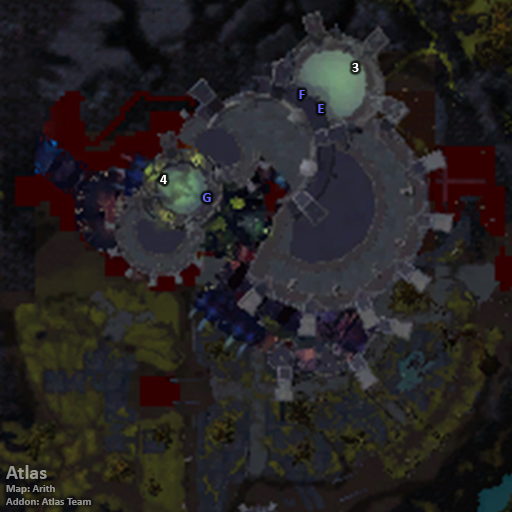
<style>
.page{position:relative;width:512px;height:512px}
.page>*{position:absolute;margin:0}
.t1{font:14px "Calibri-Bold";color:#ffffff}
.t2{font:14px "Calibri-Bold";color:#6666ff}
.t3{font:11px "Calibri-Bold";color:#959492}
.t4{font:20px "Calibri-Bold";color:#959492}
</style>
<div class="page">
<p class="t1" style="left:352px;top:63px;width:7px;height:9px">3</p>
<p class="t2" style="left:299px;top:90px;width:6px;height:9px">F</p>
<p class="t2" style="left:318px;top:104px;width:6px;height:9px">E</p>
<p class="t1" style="left:160px;top:175px;width:7px;height:9px">4</p>
<p class="t2" style="left:202px;top:193px;width:9px;height:9px">G</p>
<p class="t3" style="left:6px;top:465px;width:85px;height:40px"><span class="t4">Atlas<br></span>Map: Arith<br>Addon: Atlas Team</p>
</div>
